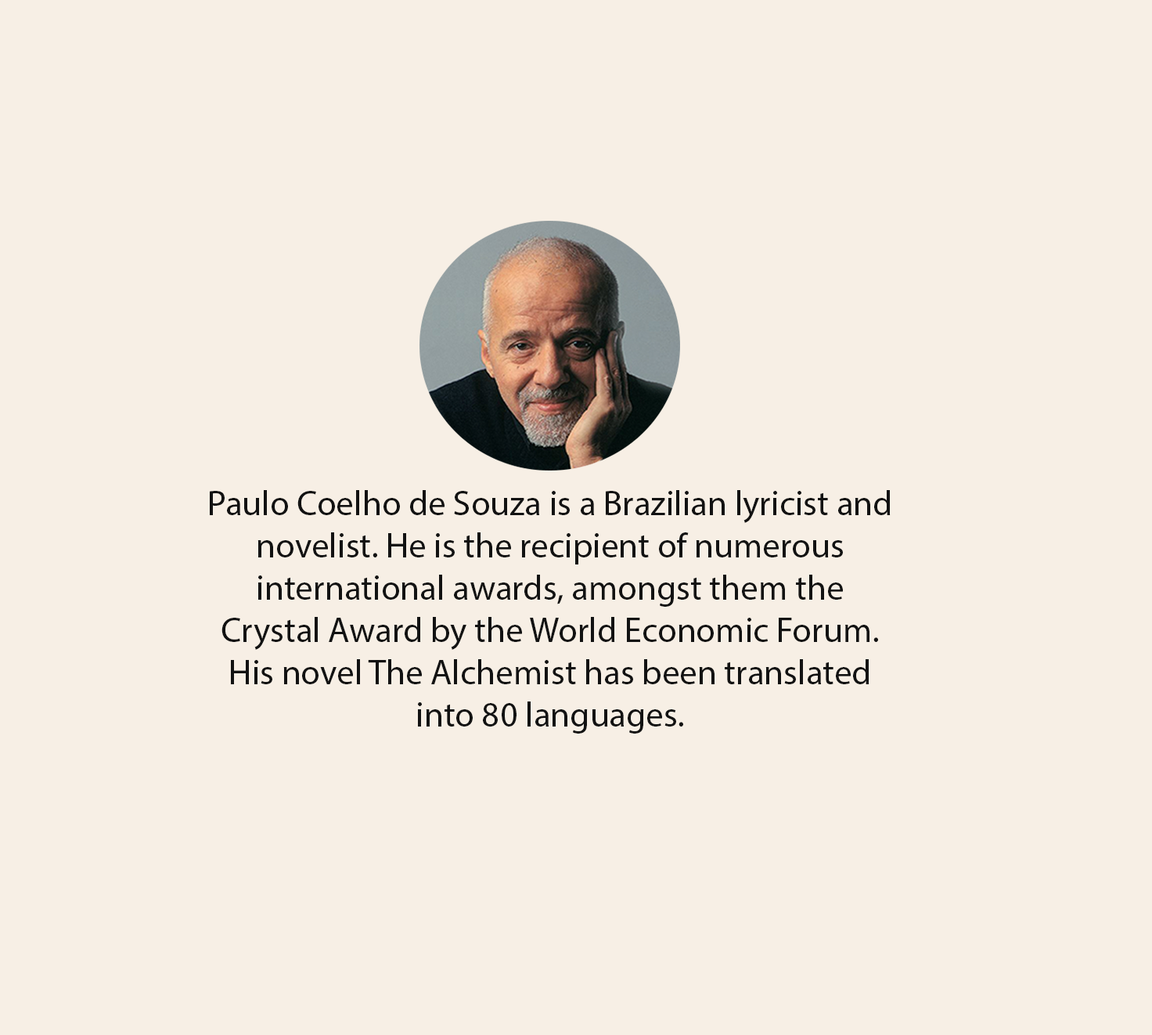
<style>
.page{position:relative;width:1152px;height:1035px;background:#f7efe5}
.page>*{position:absolute;margin:0}
.t1{font:35.2px "MyriadPro-Regular";color:#121212}
</style>
<div class="page">
<p class="t1" style="left:210px;top:490px;width:681px;height:243px;text-align:center">Paulo Coelho de Souza is a Brazilian lyricist and novelist. He is the recipient of numerous international awards, amongst them the Crystal Award by the World Economic Forum. His novel The Alchemist has been translated into 80 languages.</p>
</div>
